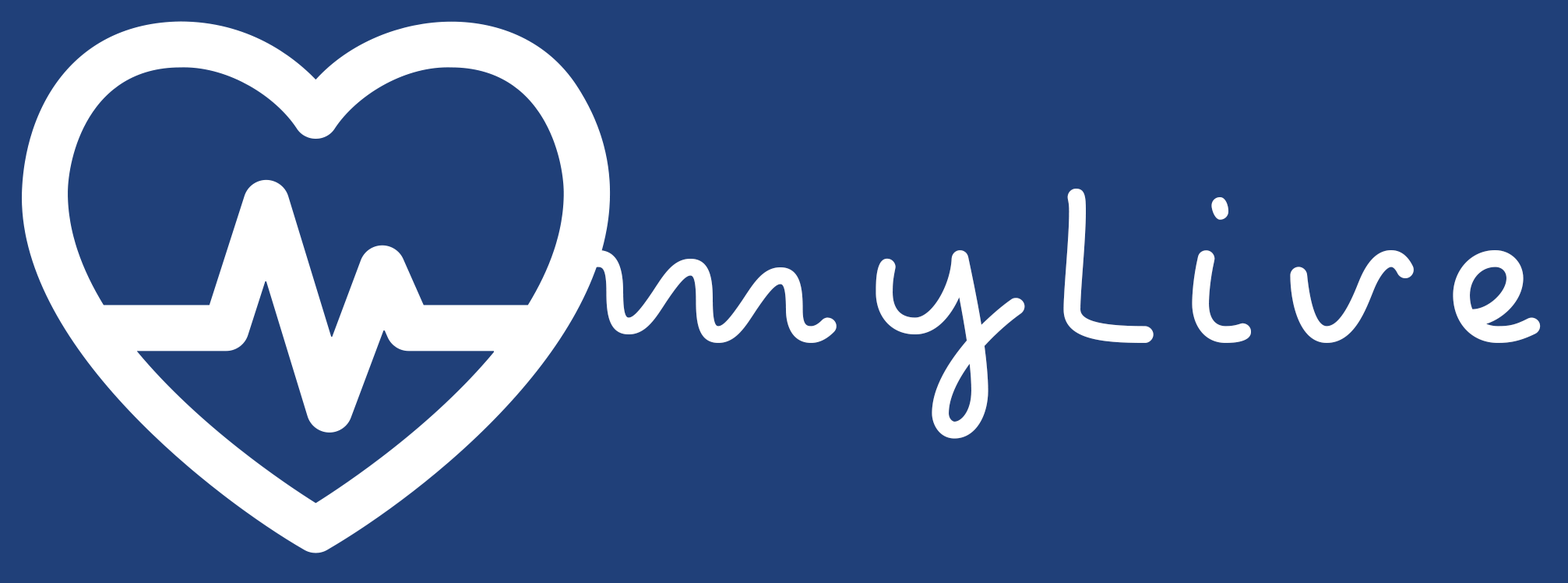
<style>
.page{position:relative;width:1568px;height:583px;background:#204079}
.page>*{position:absolute;margin:0}
.t1{font:280.4px "Pecita";letter-spacing:0.06em;color:#ffffff}
</style>
<div class="page">
<p class="t1" style="left:550px;top:189px;width:991px;height:250px">myLive</p>
</div>
